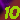
<style>
.page{position:relative;width:20px;height:20px;background:#9bd005}
.page>*{position:absolute;margin:0}
.t1{font:16px "LemonMilkbolditalic";color:#9bd005}
</style>
<div class="page">
<p class="t1" style="left:5px;top:6px;width:15px;height:13px">10</p>
</div>
